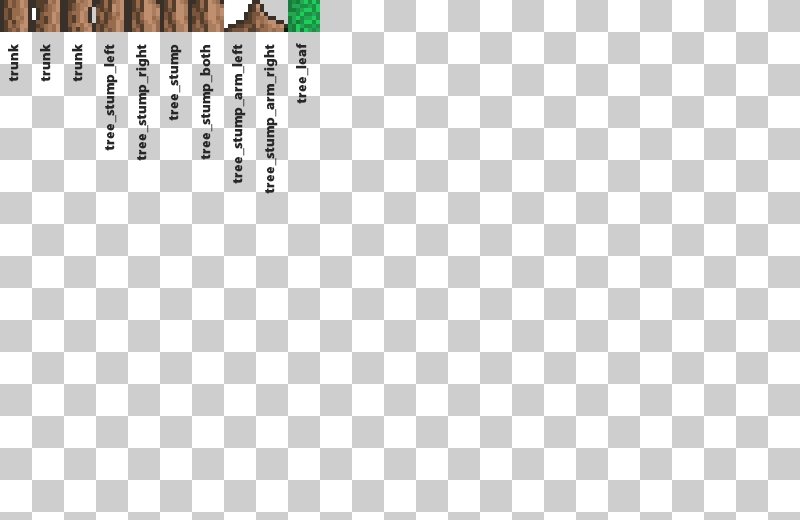
<style>
.page{position:relative;width:800px;height:520px;background:#ffffff}
.page>*{position:absolute;margin:0}
.t1{font:14px/32px "MyriadPro-Bold";color:#282828;font-weight:bold}
</style>
<div class="page">
<p class="t1" style="left:8px;top:43px;width:301px;height:151px;text-align:right;rotate:-90deg">trunk<br>trunk<br>trunk<br>tree_stump_left<br>tree_stump_right<br>tree_stump<br>tree_stump_both<br>tree_stump_arm_left<br>tree_stump_arm_right<br>tree_leaf</p>
</div>
